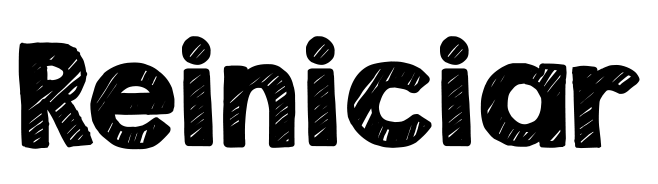
<style>
.page{position:relative;width:658px;height:184px;background:#ffffff}
.page>*{position:absolute;margin:0}
.t1{font:125px "KGSecondChancesSketch";color:#000000;font-weight:bold}
</style>
<div class="page">
<p class="t1" style="left:18px;top:36px;width:622px;height:114px">Reiniciar</p>
</div>
